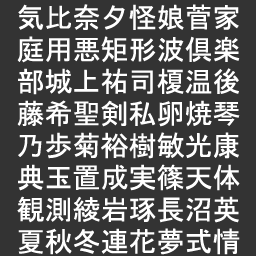
<style>
.page{position:relative;width:256px;height:256px;background:#333333}
.page>*{position:absolute;margin:0}
.t1{font:28px "MS-Gothic";color:#ffffff}
</style>
<div class="page">
<p class="t1" style="left:17px;top:4px;width:223px;height:251px">気比奈夕怪娘菅家<br>庭用悪矩形波倶楽<br>部城上祐司榎温後<br>藤希聖剣私卵焼琴<br>乃歩菊裕樹敏光康<br>典玉置成実篠天体<br>観測綾岩琢長沼英<br>夏秋冬連花夢式情</p>
</div>
